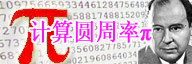
<style>
.page{position:relative;width:192px;height:64px}
.page>*{position:absolute;margin:0}
.t1{font:24px "SimSun";color:#f915f6;font-weight:bold;scale:0.9 1}
.t2{font:24px "TimesNewRomanPSMT";color:#f915f6;font-weight:bold;scale:0.9 1}
</style>
<div class="page">
<p class="t1" style="left:30px;top:20px;width:122px;height:23px">计算圆周率<span class="t2">π</span></p>
</div>
